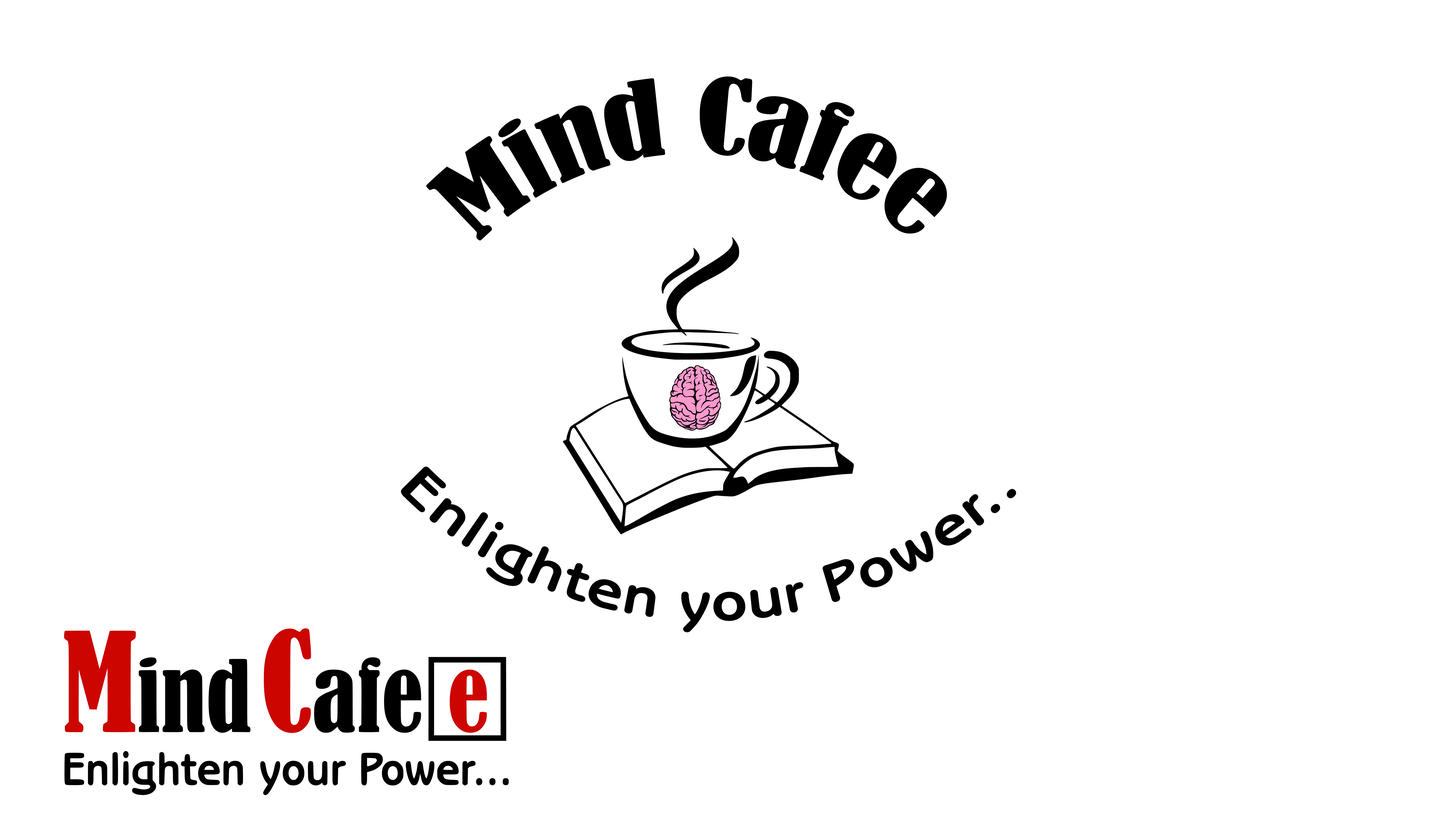
<style>
.page{position:relative;width:1432px;height:833px;background:#ffffff}
.page>*{position:absolute;margin:0}
.t1{font:98.2px "BernardMT-Condensed";color:#000000}
.t2{font:55.5px "BenguiatGothicStd-Bold";color:#000000}
</style>
<div class="page">
<p class="t1" style="left:426px;top:76px;width:521px;height:164px">Mind Cafee</p>
<p class="t2" style="left:401px;top:466px;width:615px;height:166px">Enlighten your Power..</p>
</div>
